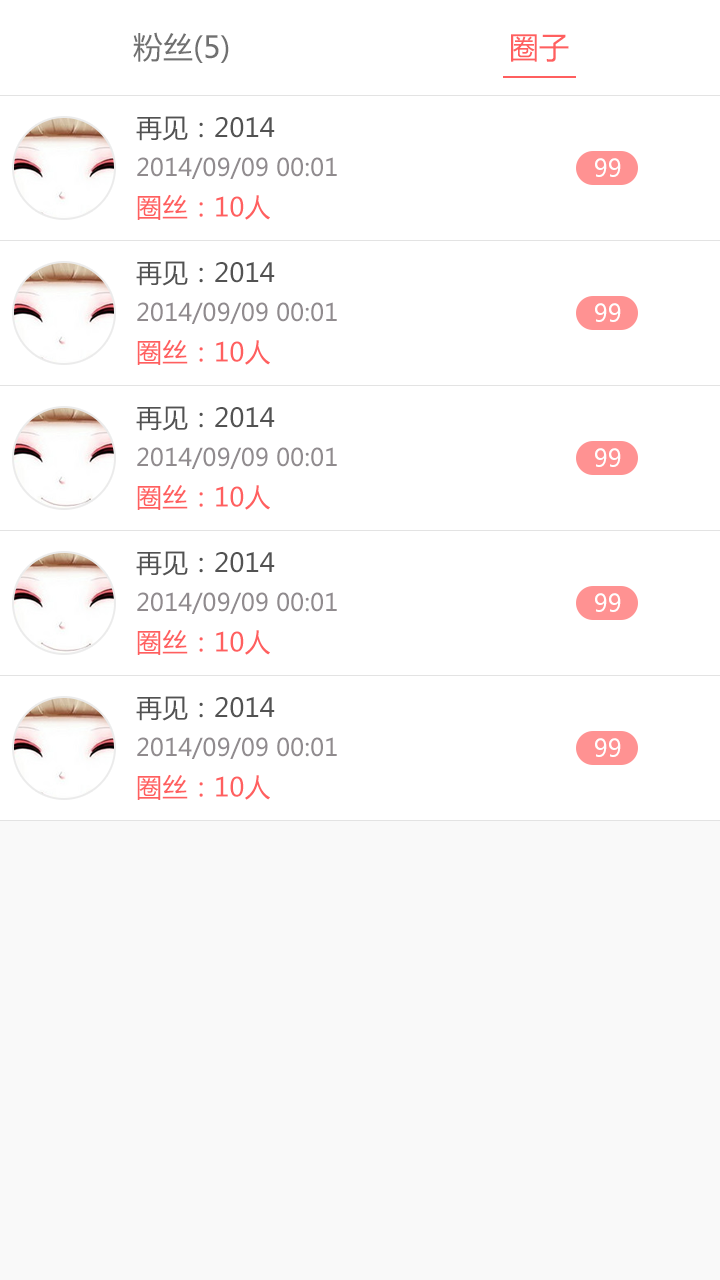
<style>
.page{position:relative;width:720px;height:1280px;background:#ffffff}
.page>*{position:absolute;margin:0}
.t1{font:30px "MicrosoftYaHei";color:#707070}
.t2{font:30px "MicrosoftYaHei";color:#ff5f5f}
.t3{font:26px "MicrosoftYaHei";color:#525252}
.t4{font:24px "MicrosoftYaHei";color:#908b8e}
.t5{font:24px "MicrosoftYaHei";color:#ffffff}
.t6{font:26px "MicrosoftYaHei";color:#ff5f5f}
</style>
<div class="page">
<p class="t1" style="left:133px;top:32px;width:96px;height:31px">粉丝(5)</p>
<p class="t2" style="left:511px;top:34px;width:58px;height:28px">圈子</p>
<p class="t3" style="left:136px;top:116px;width:139px;height:25px">再见：2014</p>
<p class="t4" style="left:137px;top:157px;width:200px;height:22px">2014/09/09 00:01</p>
<p class="t5" style="left:595px;top:158px;width:26px;height:19px">99</p>
<p class="t6" style="left:137px;top:194px;width:133px;height:26px">圈丝：10人</p>
<p class="t3" style="left:136px;top:261px;width:139px;height:25px">再见：2014</p>
<p class="t4" style="left:137px;top:302px;width:200px;height:22px">2014/09/09 00:01</p>
<p class="t5" style="left:595px;top:303px;width:26px;height:19px">99</p>
<p class="t6" style="left:137px;top:339px;width:133px;height:26px">圈丝：10人</p>
<p class="t3" style="left:136px;top:406px;width:139px;height:25px">再见：2014</p>
<p class="t4" style="left:137px;top:447px;width:200px;height:22px">2014/09/09 00:01</p>
<p class="t5" style="left:595px;top:448px;width:26px;height:19px">99</p>
<p class="t6" style="left:137px;top:484px;width:133px;height:26px">圈丝：10人</p>
<p class="t3" style="left:136px;top:551px;width:139px;height:25px">再见：2014</p>
<p class="t4" style="left:137px;top:592px;width:200px;height:22px">2014/09/09 00:01</p>
<p class="t5" style="left:595px;top:593px;width:26px;height:19px">99</p>
<p class="t6" style="left:137px;top:629px;width:133px;height:26px">圈丝：10人</p>
<p class="t3" style="left:136px;top:696px;width:139px;height:25px">再见：2014</p>
<p class="t4" style="left:137px;top:737px;width:200px;height:22px">2014/09/09 00:01</p>
<p class="t5" style="left:595px;top:738px;width:26px;height:19px">99</p>
<p class="t6" style="left:137px;top:774px;width:133px;height:26px">圈丝：10人</p>
</div>
